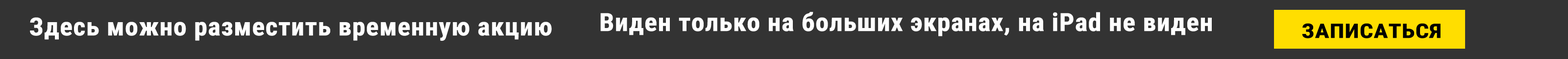
<style>
.page{position:relative;width:1568px;height:59px;background:#333333}
.page>*{position:absolute;margin:0}
.t1{font:24.7px "RobotoCondensed-Bold";color:#ffffff;font-weight:bold;scale:1.07 1}
.t2{font:19.8px "RobotoCondensed-Bold";color:#000000;font-weight:bold;scale:1.19 1}
</style>
<div class="page">
<p class="t1" style="left:30px;top:17px;width:522px;height:24px">Здесь можно разместить временную акцию</p>
<p class="t1" style="left:600px;top:12px;width:612px;height:24px">Виден только на больших экранах, на iPad не виден</p>
<p class="t2" style="left:1302px;top:23px;width:139px;height:15px">ЗАПИСАТЬСЯ</p>
</div>
